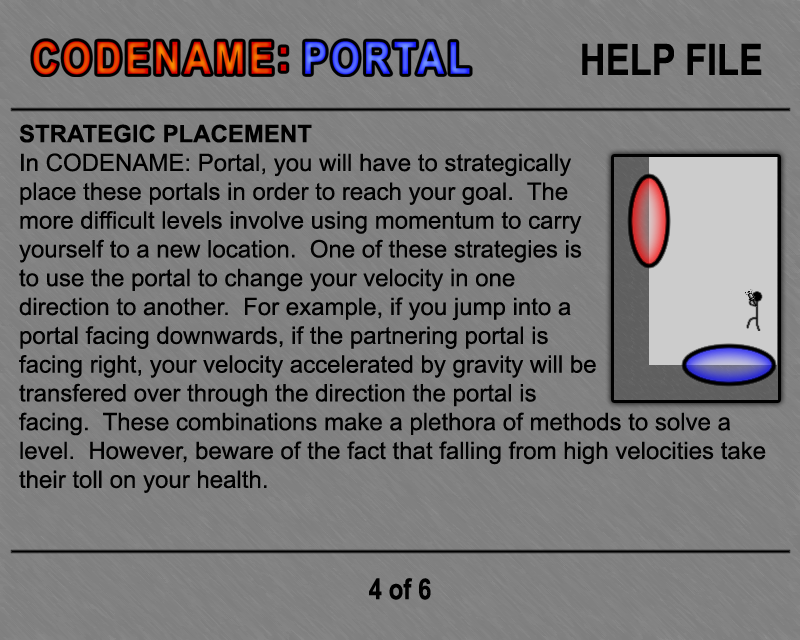
<style>
.page{position:relative;width:800px;height:640px;background:#808080}
.page>*{position:absolute;margin:0}
.t1{font:43.2px "Arial-BoldMT";color:#000000;scale:0.83 1}
.t2{font:24px "ArialMT";color:#000000}
.t3{font:24px "Arial-BoldMT";color:#000000}
.t4{font:28.8px "Arial-BoldMT";color:#000000;scale:0.83 1}
</style>
<div class="page">
<p class="t1" style="left:582px;top:43px;width:180px;height:32px">HELP FILE</p>
<p class="t2" style="left:19px;top:124px;width:747px;height:369px"><span class="t3">STRATEGIC PLACEMENT<br></span>In CODENAME: Portal, you will have to strategically <br>place these portals in order to reach your goal.  The<br>more difficult levels involve using momentum to carry <br>yourself to a new location.  One of these strategies is <br>to use the portal to change your velocity in one <br>direction to another.  For example, if you jump into a <br>portal facing downwards, if the partnering portal is <br>facing right, your velocity accelerated by gravity will be <br>transfered over through the direction the portal is <br>facing.  These combinations make a plethora of methods to solve a level.  However, beware of the fact that falling from high velocities take their toll on your health.</p>
<p class="t4" style="left:369px;top:578px;width:62px;height:22px">4 of 6</p>
</div>
